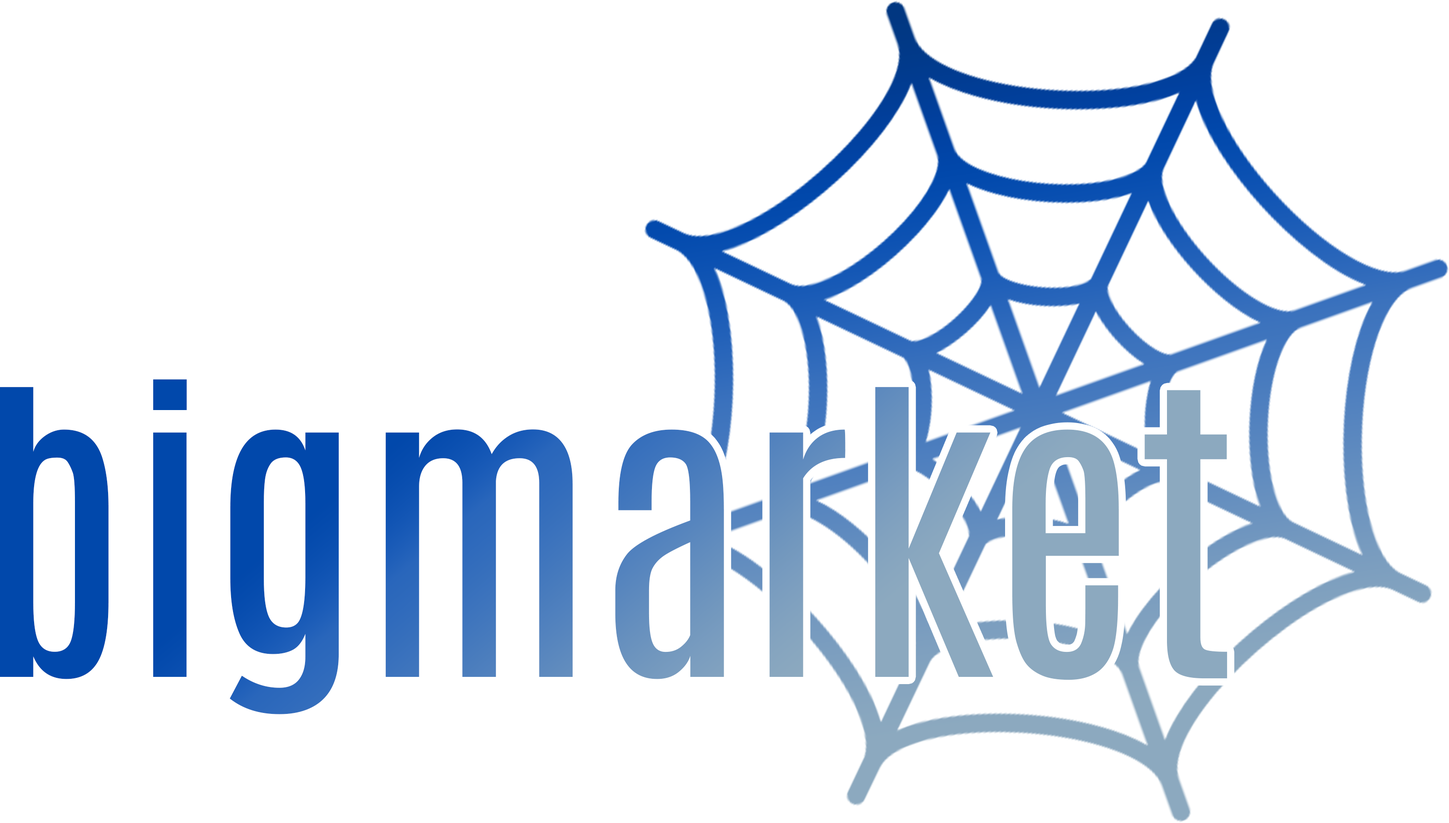
<style>
.page{position:relative;width:1449px;height:823px;background:#ffffff}
.page>*{position:absolute;margin:0}
.t1{font:333.5px "Antonio-Regular"}
</style>
<div class="page">
<p class="t1" style="left:0px;top:379px;width:1228px;height:335px">bigmarket</p>
</div>
